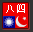
<style>
.page{position:relative;width:33px;height:32px;background:#f20000}
.page>*{position:absolute;margin:0}
.t1{font:10.4px "SimSun";color:#ffffff}
</style>
<div class="page">
<p class="t1" style="left:6px;top:4px;width:19px;height:9px">八四</p>
</div>
